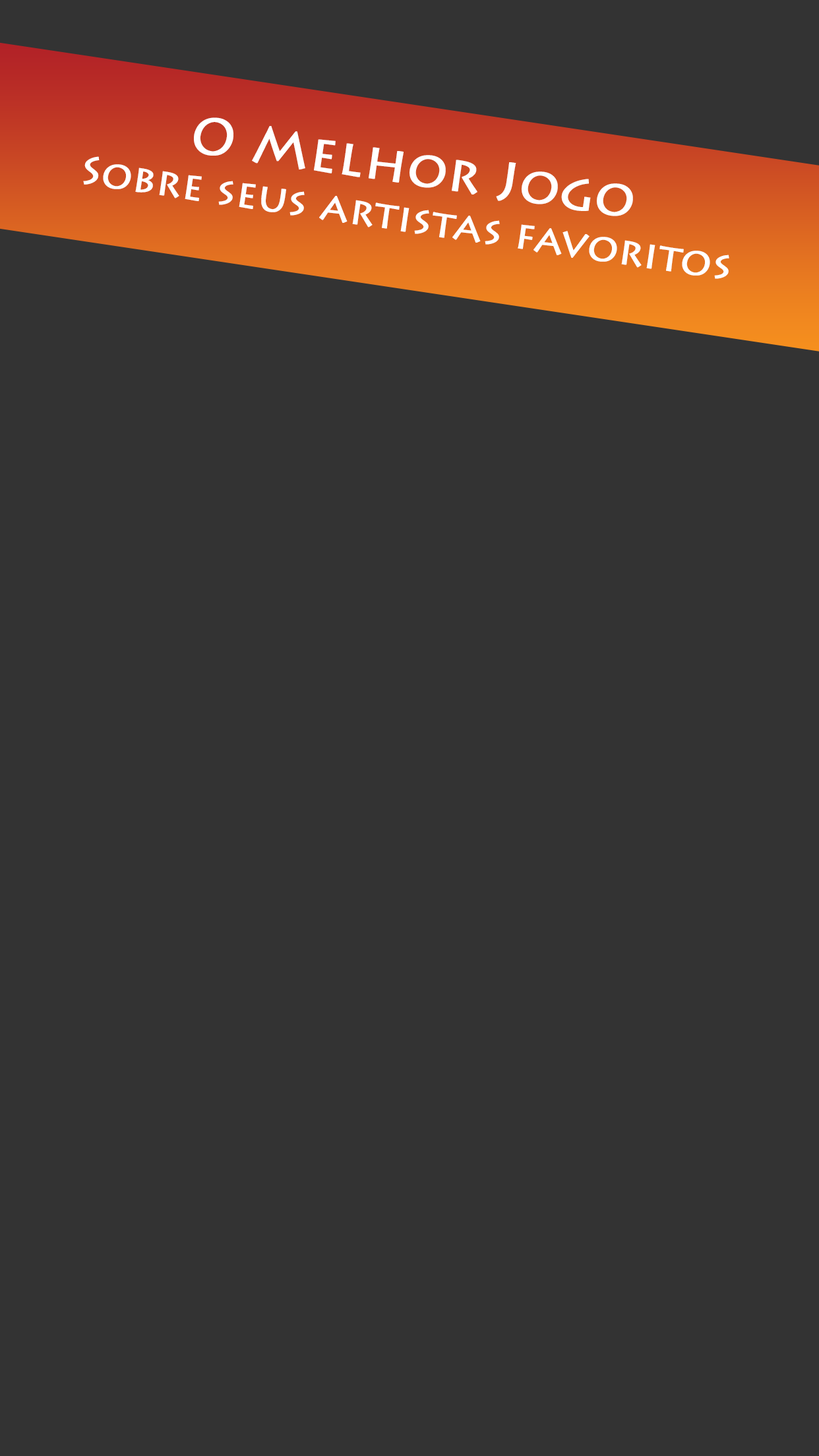
<style>
.page{position:relative;width:819px;height:1456px;background:#333333}
.page>*{position:absolute;margin:0}
.t1{font:39.6px "LithosPro-Regular";color:#ffffff;font-weight:bold}
.t2{font:51.5px "LithosPro-Regular";color:#ffffff;font-weight:bold}
</style>
<div class="page">
<p class="t1" style="left:83px;top:117px;width:646px;height:162px;text-align:center;rotate:9deg"><span class="t2">O Melhor Jogo<br></span>Sobre seus artistas favoritos</p>
</div>
